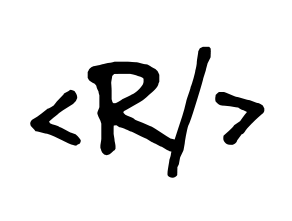
<style>
.page{position:relative;width:292px;height:221px;background:#ffffff}
.page>*{position:absolute;margin:0}
.t1{font:149.5px "BuxtonSketch";color:#000000}
</style>
<div class="page">
<p class="t1" style="left:30px;top:46px;width:235px;height:132px">&lt;R/&gt;</p>
</div>
